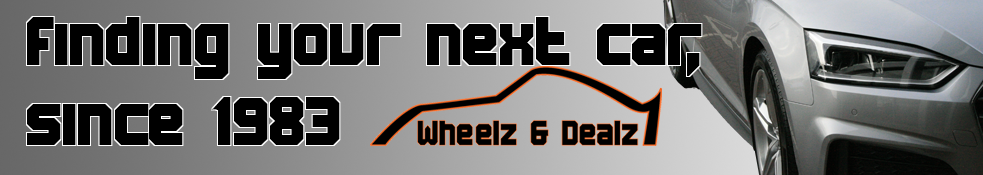
<style>
.page{position:relative;width:983px;height:175px}
.page>*{position:absolute;margin:0}
.t1{font:66.7px "BNMachine";color:#000000}
</style>
<div class="page">
<p class="t1" style="left:27px;top:17px;width:675px;height:128px">finding your next car, <br> since 1983</p>
</div>
